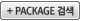
<style>
.page{position:relative;width:85px;height:21px}
.page>*{position:absolute;margin:0}
.t1{font:10px "RixGoB";letter-spacing:-0.02em;color:#2c2c2c;text-transform:uppercase;scale:0.95 1}
</style>
<div class="page">
<p class="t1" style="left:7px;top:6px;width:67px;height:10px">+ package 검색</p>
</div>
